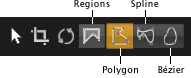
<style>
.page{position:relative;width:191px;height:78px;background:#ffffff}
.page>*{position:absolute;margin:0}
.t1{font:9px "LucidaGrande"}
.t2{font:9px "LucidaGrande";color:#000000}
</style>
<div class="page">
<p class="t1" style="left:74px;top:0px;width:36px;height:9px">Regions</p>
<p class="t2" style="left:131px;top:0px;width:28px;height:9px">Spline</p>
<p class="t1" style="left:158px;top:65px;width:27px;height:8px">Bézier</p>
<p class="t2" style="left:103px;top:66px;width:35px;height:9px">Polygon</p>
</div>
